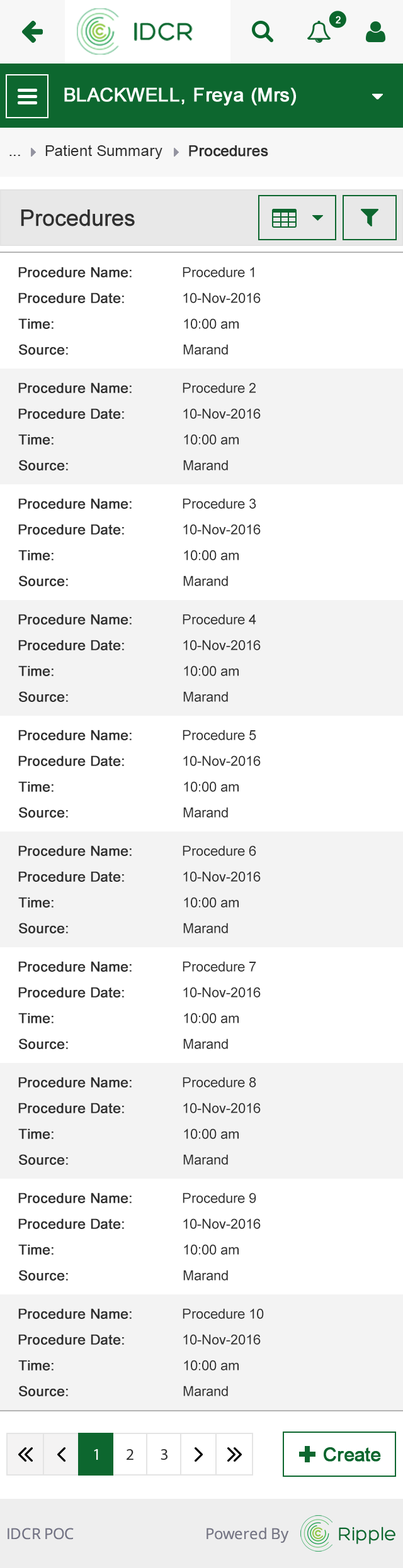
<style>
.page{position:relative;width:403px;height:1568px;background:#ffffff}
.page>*{position:absolute;margin:0}
.t1{font:15.1px "ArialMT";color:#313131}
.t2{font:15.1px "ArialMT";color:#313131;font-weight:bold}
.t3{font:22.6px "ArialMT";color:#303030;font-weight:bold}
.t4{font:13.8px "ArialMT";color:#303030;font-weight:bold}
.t5{font:13.8px "ArialMT";color:#303030}
</style>
<div class="page">
<p class="t1" style="left:45px;top:145px;width:117px;height:14px">Patient Summary</p>
<p class="t2" style="left:189px;top:145px;width:79px;height:12px">Procedures</p>
<p class="t1" style="left:9px;top:155px;width:11px;height:1px">...</p>
<p class="t3" style="left:21px;top:209px;width:114px;height:17px">Procedures</p>
<p class="t4" style="left:18px;top:267px;width:113px;height:10px">Procedure Name:</p>
<p class="t5" style="left:182px;top:267px;width:72px;height:10px">Procedure 1</p>
<p class="t4" style="left:18px;top:292px;width:106px;height:11px">Procedure Date:</p>
<p class="t5" style="left:183px;top:292px;width:77px;height:11px">10-Nov-2016</p>
<p class="t4" style="left:18px;top:318px;width:35px;height:11px">Time:</p>
<p class="t5" style="left:184px;top:318px;width:54px;height:11px">10:00 am</p>
<p class="t4" style="left:19px;top:344px;width:49px;height:11px">Source:</p>
<p class="t5" style="left:183px;top:344px;width:45px;height:11px">Marand</p>
<p class="t4" style="left:18px;top:382px;width:113px;height:11px">Procedure Name:</p>
<p class="t5" style="left:182px;top:382px;width:73px;height:11px">Procedure 2</p>
<p class="t4" style="left:18px;top:408px;width:106px;height:11px">Procedure Date:</p>
<p class="t5" style="left:183px;top:408px;width:77px;height:11px">10-Nov-2016</p>
<p class="t4" style="left:18px;top:434px;width:35px;height:11px">Time:</p>
<p class="t5" style="left:184px;top:434px;width:54px;height:11px">10:00 am</p>
<p class="t4" style="left:19px;top:460px;width:49px;height:10px">Source:</p>
<p class="t5" style="left:183px;top:460px;width:45px;height:10px">Marand</p>
<p class="t4" style="left:18px;top:498px;width:113px;height:11px">Procedure Name:</p>
<p class="t5" style="left:182px;top:498px;width:74px;height:11px">Procedure 3</p>
<p class="t4" style="left:18px;top:524px;width:106px;height:11px">Procedure Date:</p>
<p class="t5" style="left:183px;top:524px;width:77px;height:11px">10-Nov-2016</p>
<p class="t4" style="left:18px;top:550px;width:35px;height:10px">Time:</p>
<p class="t5" style="left:184px;top:550px;width:54px;height:10px">10:00 am</p>
<p class="t4" style="left:19px;top:575px;width:49px;height:11px">Source:</p>
<p class="t5" style="left:183px;top:575px;width:45px;height:11px">Marand</p>
<p class="t4" style="left:18px;top:614px;width:113px;height:11px">Procedure Name:</p>
<p class="t5" style="left:182px;top:614px;width:74px;height:11px">Procedure 4</p>
<p class="t4" style="left:18px;top:640px;width:106px;height:10px">Procedure Date:</p>
<p class="t5" style="left:183px;top:640px;width:77px;height:10px">10-Nov-2016</p>
<p class="t4" style="left:18px;top:665px;width:35px;height:11px">Time:</p>
<p class="t5" style="left:184px;top:665px;width:54px;height:11px">10:00 am</p>
<p class="t4" style="left:19px;top:691px;width:49px;height:11px">Source:</p>
<p class="t5" style="left:183px;top:691px;width:45px;height:11px">Marand</p>
<p class="t4" style="left:18px;top:730px;width:113px;height:10px">Procedure Name:</p>
<p class="t5" style="left:182px;top:730px;width:74px;height:10px">Procedure 5</p>
<p class="t4" style="left:18px;top:755px;width:106px;height:11px">Procedure Date:</p>
<p class="t5" style="left:183px;top:755px;width:77px;height:11px">10-Nov-2016</p>
<p class="t4" style="left:18px;top:781px;width:35px;height:11px">Time:</p>
<p class="t5" style="left:184px;top:781px;width:54px;height:11px">10:00 am</p>
<p class="t4" style="left:19px;top:807px;width:49px;height:11px">Source:</p>
<p class="t5" style="left:183px;top:807px;width:45px;height:11px">Marand</p>
<p class="t4" style="left:18px;top:845px;width:113px;height:11px">Procedure Name:</p>
<p class="t5" style="left:182px;top:845px;width:74px;height:11px">Procedure 6</p>
<p class="t4" style="left:18px;top:871px;width:106px;height:11px">Procedure Date:</p>
<p class="t5" style="left:183px;top:871px;width:77px;height:11px">10-Nov-2016</p>
<p class="t4" style="left:18px;top:897px;width:35px;height:11px">Time:</p>
<p class="t5" style="left:184px;top:897px;width:54px;height:11px">10:00 am</p>
<p class="t4" style="left:19px;top:923px;width:49px;height:10px">Source:</p>
<p class="t5" style="left:183px;top:923px;width:45px;height:10px">Marand</p>
<p class="t4" style="left:18px;top:961px;width:113px;height:11px">Procedure Name:</p>
<p class="t5" style="left:182px;top:961px;width:74px;height:11px">Procedure 7</p>
<p class="t4" style="left:18px;top:987px;width:106px;height:11px">Procedure Date:</p>
<p class="t5" style="left:183px;top:987px;width:77px;height:11px">10-Nov-2016</p>
<p class="t4" style="left:18px;top:1013px;width:35px;height:10px">Time:</p>
<p class="t5" style="left:184px;top:1013px;width:54px;height:10px">10:00 am</p>
<p class="t4" style="left:19px;top:1038px;width:49px;height:11px">Source:</p>
<p class="t5" style="left:183px;top:1038px;width:45px;height:11px">Marand</p>
<p class="t4" style="left:18px;top:1077px;width:113px;height:10px">Procedure Name:</p>
<p class="t5" style="left:182px;top:1077px;width:74px;height:10px">Procedure 8</p>
<p class="t4" style="left:18px;top:1103px;width:106px;height:10px">Procedure Date:</p>
<p class="t5" style="left:183px;top:1103px;width:77px;height:10px">10-Nov-2016</p>
<p class="t4" style="left:18px;top:1128px;width:35px;height:11px">Time:</p>
<p class="t5" style="left:184px;top:1128px;width:54px;height:11px">10:00 am</p>
<p class="t4" style="left:19px;top:1154px;width:49px;height:11px">Source:</p>
<p class="t5" style="left:183px;top:1154px;width:45px;height:11px">Marand</p>
<p class="t4" style="left:18px;top:1193px;width:113px;height:10px">Procedure Name:</p>
<p class="t5" style="left:182px;top:1193px;width:74px;height:10px">Procedure 9</p>
<p class="t4" style="left:18px;top:1218px;width:106px;height:11px">Procedure Date:</p>
<p class="t5" style="left:183px;top:1218px;width:77px;height:11px">10-Nov-2016</p>
<p class="t4" style="left:18px;top:1244px;width:35px;height:11px">Time:</p>
<p class="t5" style="left:184px;top:1244px;width:54px;height:11px">10:00 am</p>
<p class="t4" style="left:19px;top:1270px;width:49px;height:11px">Source:</p>
<p class="t5" style="left:183px;top:1270px;width:45px;height:11px">Marand</p>
<p class="t4" style="left:18px;top:1308px;width:113px;height:11px">Procedure Name:</p>
<p class="t5" style="left:182px;top:1308px;width:82px;height:11px">Procedure 10</p>
<p class="t4" style="left:18px;top:1334px;width:106px;height:11px">Procedure Date:</p>
<p class="t5" style="left:183px;top:1334px;width:77px;height:11px">10-Nov-2016</p>
<p class="t4" style="left:18px;top:1360px;width:35px;height:11px">Time:</p>
<p class="t5" style="left:184px;top:1360px;width:54px;height:11px">10:00 am</p>
<p class="t4" style="left:19px;top:1386px;width:49px;height:10px">Source:</p>
<p class="t5" style="left:183px;top:1386px;width:45px;height:10px">Marand</p>
</div>
